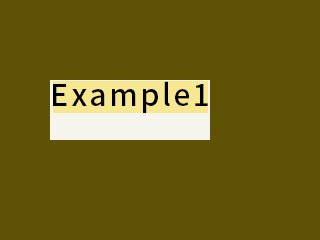
<style>
.page{position:relative;width:320px;height:240px;background:#5d5206}
.page>*{position:absolute;margin:0}
.t1{font:30px "SourceHanSans-Medium";letter-spacing:0.1em;color:#000000}
</style>
<div class="page">
<p class="t1" style="left:53px;top:81px;width:155px;height:32px">Example1</p>
</div>
